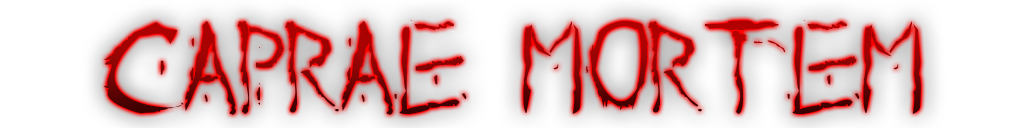
<style>
.page{position:relative;width:1024px;height:128px}
.page>*{position:absolute;margin:0}
.t1{font:133.2px "AboutDead"}
</style>
<div class="page">
<p class="t1" style="left:103px;top:20px;width:818px;height:95px">Caprae Mortem</p>
</div>
